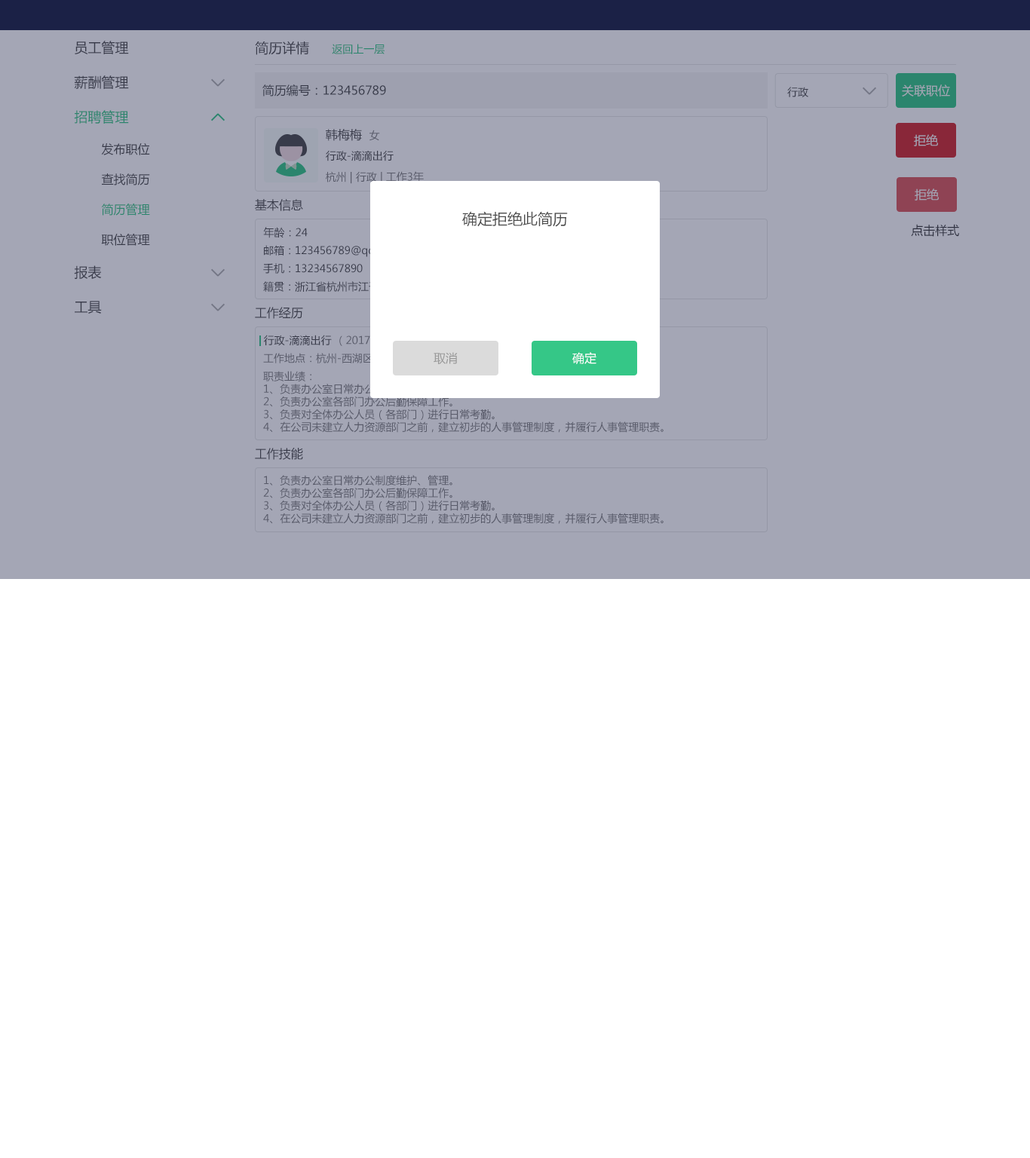
<style>
.page{position:relative;width:1030px;height:1158px;background:#ffffff}
.page>*{position:absolute;margin:0}
.t1{font:13.6px "MicrosoftYaHei";color:#4d4d4d}
.t2{font:10.6px "MicrosoftYaHei";color:#2b856d}
.t3{font:12.1px "MicrosoftYaHei";color:#4d4d4d}
.t4{font:10.6px "MicrosoftYaHei";color:#4d4d4d}
.t5{font:12.1px "MicrosoftYaHei";color:#a4a6b5}
.t6{font:13.6px "MicrosoftYaHei";color:#2b856d}
.t7{font:10.6px "MicrosoftYaHei";color:#585a69}
.t8{font:12.1px "MicrosoftYaHei";color:#2b856d}
.t9{font:15.1px "MicrosoftYaHei";color:#4d4d4d}
.t10{font:12.1px "MicrosoftYaHei";color:#393939}
.t11{font:10.3px "MicrosoftYaHei";color:#4d4d4d}
.t12{font:10.3px "MicrosoftYaHei";color:#585a69}
.t13{font:12.1px "MicrosoftYaHei";color:#999999}
.t14{font:12.1px "MicrosoftYaHei";color:#ffffff}
</style>
<div class="page">
<p class="t1" style="left:75px;top:41px;width:54px;height:13px">员工管理</p>
<p class="t1" style="left:255px;top:41px;width:54px;height:14px">简历详情</p>
<p class="t2" style="left:332px;top:44px;width:52px;height:10px">返回上一层</p>
<p class="t1" style="left:74px;top:75px;width:55px;height:14px">薪酬管理</p>
<p class="t3" style="left:262px;top:84px;width:124px;height:12px">简历编号：123456789</p>
<p class="t4" style="left:787px;top:87px;width:21px;height:10px">行政</p>
<p class="t5" style="left:902px;top:84px;width:48px;height:12px">关联职位</p>
<p class="t6" style="left:74px;top:110px;width:55px;height:14px">招聘管理</p>
<p class="t3" style="left:326px;top:129px;width:36px;height:12px">韩梅梅</p>
<p class="t7" style="left:369px;top:130px;width:11px;height:11px">女</p>
<p class="t5" style="left:914px;top:134px;width:24px;height:12px">拒绝</p>
<p class="t3" style="left:101px;top:143px;width:49px;height:12px">发布职位</p>
<p class="t4" style="left:326px;top:150px;width:68px;height:11px">行政-滴滴出行</p>
<p class="t3" style="left:101px;top:173px;width:49px;height:12px">查找简历</p>
<p class="t7" style="left:326px;top:171px;width:98px;height:13px">杭州 | 行政 | 工作3年</p>
<p class="t5" style="left:914px;top:188px;width:25px;height:13px">拒绝</p>
<p class="t8" style="left:101px;top:204px;width:49px;height:12px">简历管理</p>
<p class="t3" style="left:255px;top:199px;width:48px;height:12px">基本信息</p>
<p class="t9" style="left:462px;top:211px;width:106px;height:16px">确定拒绝此简历</p>
<p class="t3" style="left:101px;top:234px;width:49px;height:12px">职位管理</p>
<p class="t4" style="left:263px;top:227px;width:45px;height:11px">年龄：24</p>
<p class="t10" style="left:911px;top:224px;width:48px;height:13px">点击样式</p>
<p class="t11" style="left:264px;top:245px;width:135px;height:12px">邮箱：123456789@qq.com</p>
<p class="t1" style="left:74px;top:265px;width:28px;height:14px">报表</p>
<p class="t4" style="left:263px;top:263px;width:100px;height:11px">手机：13234567890</p>
<p class="t1" style="left:75px;top:301px;width:27px;height:13px">工具</p>
<p class="t3" style="left:255px;top:307px;width:48px;height:12px">工作经历</p>
<p class="t4" style="left:263px;top:335px;width:69px;height:11px">行政-滴滴出行</p>
<p class="t12" style="left:263px;top:353px;width:110px;height:10px">工作地点：杭州-西湖区</p>
<p class="t13" style="left:433px;top:352px;width:25px;height:12px">取消</p>
<p class="t14" style="left:572px;top:352px;width:24px;height:12px">确定</p>
<p class="t7" style="left:263px;top:371px;width:400px;height:62px">职责业绩：<br>1、负责办公室日常办公制度维护、管理。<br>2、负责办公室各部门办公后勤保障工作。<br>3、负责对全体办公人员（各部门）进行日常考勤。<br>4、在公司未建立人力资源部门之前，建立初步的人事管理制度，并履行人事管理职责。</p>
<p class="t3" style="left:255px;top:447px;width:48px;height:13px">工作技能</p>
<p class="t7" style="left:263px;top:475px;width:400px;height:49px">1、负责办公室日常办公制度维护、管理。<br>2、负责办公室各部门办公后勤保障工作。<br>3、负责对全体办公人员（各部门）进行日常考勤。<br>4、在公司未建立人力资源部门之前，建立初步的人事管理制度，并履行人事管理职责。</p>
</div>
